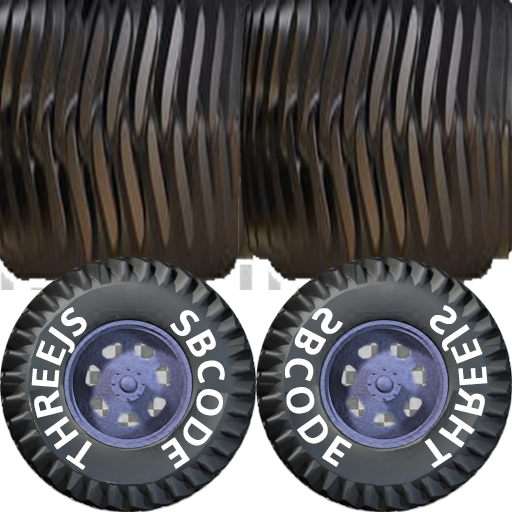
<style>
.page{position:relative;width:512px;height:512px}
.page>*{position:absolute;margin:0}
.t1{font:37.3px "Oxygen-Bold";color:#ffffff;font-weight:bold}
.t2{font:36px "Oxygen-Bold";color:#ffffff;font-weight:bold}
</style>
<div class="page">
<p class="t1" style="left:285px;top:305px;width:203px;height:163px;rotate:-125deg">SBCODE      THREEJS</p>
<p class="t2" style="left:31px;top:307px;width:194px;height:163px;rotate:-56deg">SBCODE      THREEJS</p>
</div>
